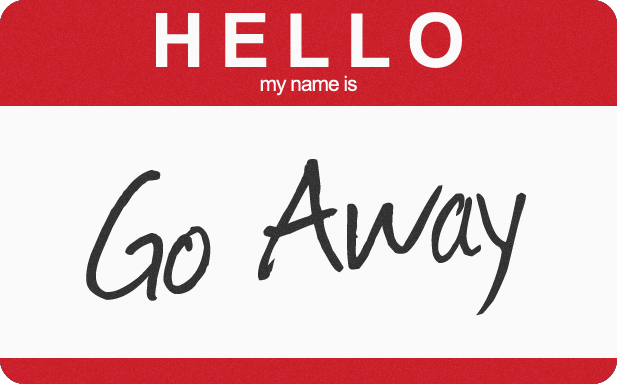
<style>
.page{position:relative;width:617px;height:384px;background:#fafafa}
.page>*{position:absolute;margin:0}
.t1{font:75px "Arial-BoldMT";letter-spacing:0.2em;color:#fafafa}
.t2{font:20.8px "ArialMT";letter-spacing:-0.045em;color:#fafafa}
.t3{font:196.4px "Journal";color:#333333}
</style>
<div class="page">
<p class="t1" style="left:156px;top:12px;width:306px;height:56px">HELLO</p>
<p class="t2" style="left:260px;top:75px;width:97px;height:21px">my name is</p>
<p class="t3" style="left:86px;top:159px;width:440px;height:157px;rotate:-7deg">Go Away</p>
</div>
